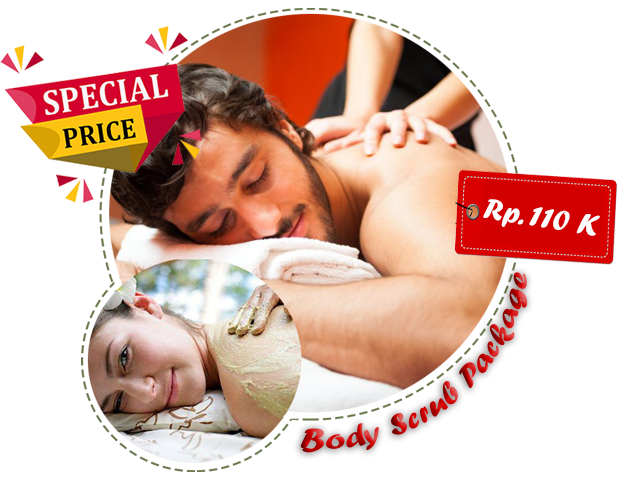
<style>
.page{position:relative;width:640px;height:480px;background:#ffffff}
.page>*{position:absolute;margin:0}
.t1{font:30.9px "ForteMT";color:#fefefe}
.t2{font:30.4px "ForteMT"}
</style>
<div class="page">
<p class="t1" style="left:483px;top:199px;width:117px;height:37px;rotate:9deg">Rp. 110 K</p>
<p class="t2" style="left:300px;top:272px;width:228px;height:181px;rotate:-37deg">Body Scrub Package</p>
</div>
